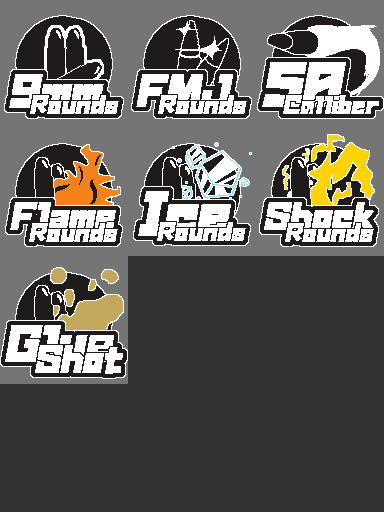
<style>
.page{position:relative;width:384px;height:512px;background:#333333}
.page>*{position:absolute;margin:0}
.t1{font:48px "GN-KMBFont-UB-OldstyleKana";color:#ffffff;font-style:italic}
.t2{font:36px "GN-KMBFont-UB-OldstyleKana";color:#ffffff;font-style:italic}
.t3{font:20px "GN-KMBFont-UB-OldstyleKana";color:#ffffff;font-style:italic}
.t4{font:30px "GN-KMBFont-UB-OldstyleKana";color:#ffffff;font-style:italic}
.t5{font:40px "GN-KMBFont-UB-OldstyleKana";color:#ffffff;font-style:italic}
</style>
<div class="page">
<p class="t1" style="left:262px;top:62px;width:84px;height:45px">50</p>
<p class="t2" style="left:9px;top:74px;width:95px;height:34px">9mm</p>
<p class="t2" style="left:136px;top:74px;width:97px;height:34px">FMJ</p>
<p class="t3" style="left:30px;top:95px;width:89px;height:19px">Rounds</p>
<p class="t3" style="left:158px;top:95px;width:89px;height:19px">Rounds</p>
<p class="t3" style="left:283px;top:95px;width:96px;height:19px">Calliber</p>
<p class="t1" style="left:138px;top:191px;width:93px;height:45px">Ice</p>
<p class="t4" style="left:10px;top:202px;width:106px;height:28px">Flame</p>
<p class="t4" style="left:264px;top:202px;width:110px;height:28px">Shock</p>
<p class="t3" style="left:157px;top:222px;width:89px;height:19px">Rounds</p>
<p class="t3" style="left:29px;top:223px;width:89px;height:19px">Rounds</p>
<p class="t3" style="left:285px;top:223px;width:89px;height:19px">Rounds</p>
<p class="t5" style="left:5px;top:325px;width:109px;height:37px">Glue</p>
<p class="t4" style="left:35px;top:345px;width:88px;height:29px">Shot</p>
</div>
